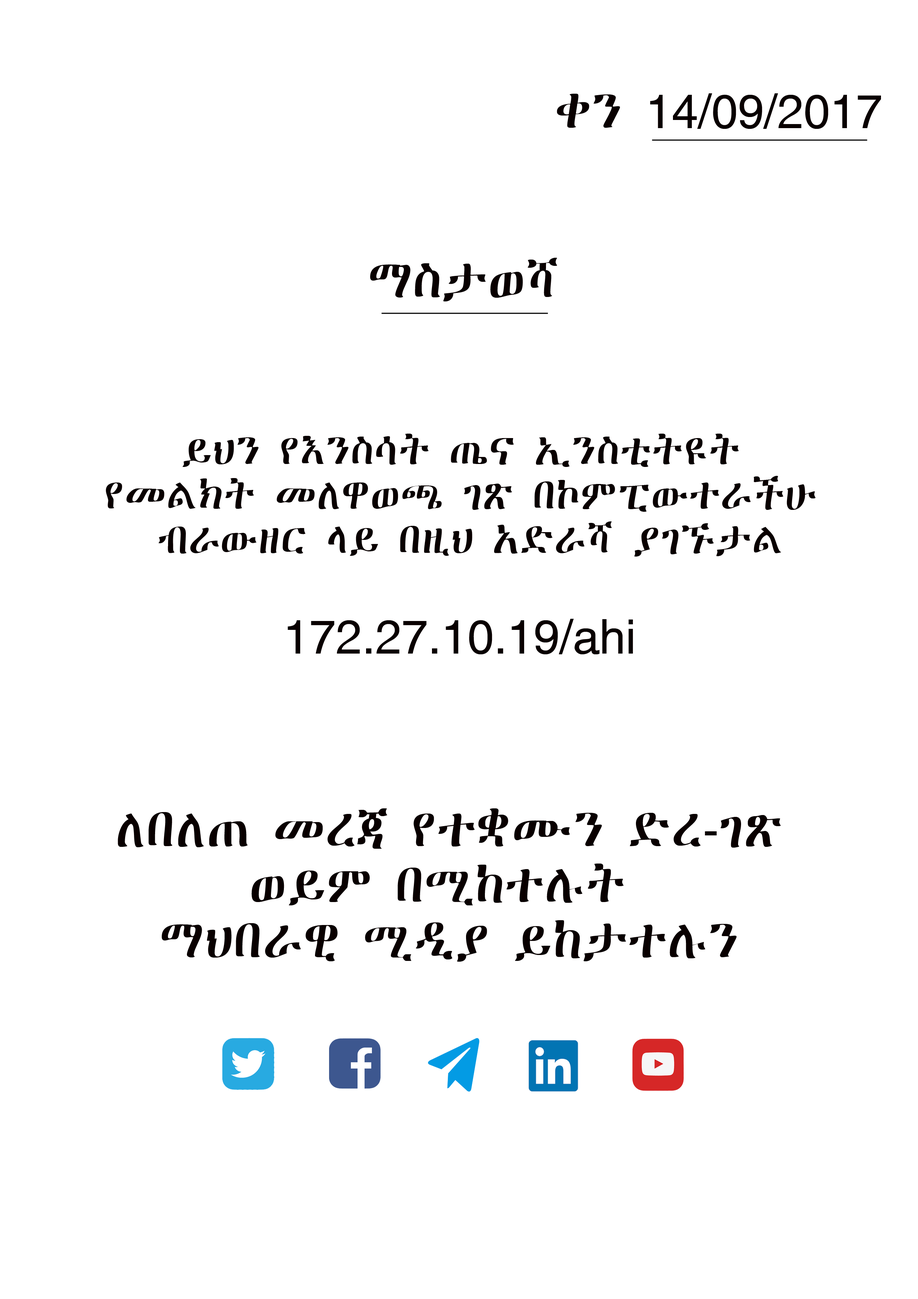
<style>
.page{position:relative;width:918px;height:1299px;background:#ffffff}
.page>*{position:absolute;margin:0}
.t1{font:46.3px "VisualGeezUnicode";color:#090000}
.t2{font:37px "VisualGeezUnicode";color:#090000}
</style>
<div class="page">
<p class="t1" style="left:557px;top:93px;width:324px;height:36px">ቀን 14/09/2017</p>
<p class="t1" style="left:370px;top:258px;width:187px;height:43px">ማስታወሻ</p>
<p class="t2" style="left:106px;top:434px;width:710px;height:122px;text-align:center">ይህን የእንስሳት ጤና ኢንስቲትዩት <br>የመልክት መለዋወጫ ገጽ በኮምፒውተራችሁ <br>ብራውዘር ላይ በዚህ አድራሻ ያገኙታል</p>
<p class="t1" style="left:288px;top:619px;width:345px;height:35px">172.27.10.19/ahi</p>
<p class="t1" style="left:118px;top:808px;width:663px;height:153px;text-align:center">ለበለጠ መረጃ የተቋሙን ድረ-ገጽ<br>ወይም በሚከተሉት <br>ማህበራዊ ሚዲያ ይከታተሉን</p>
</div>
